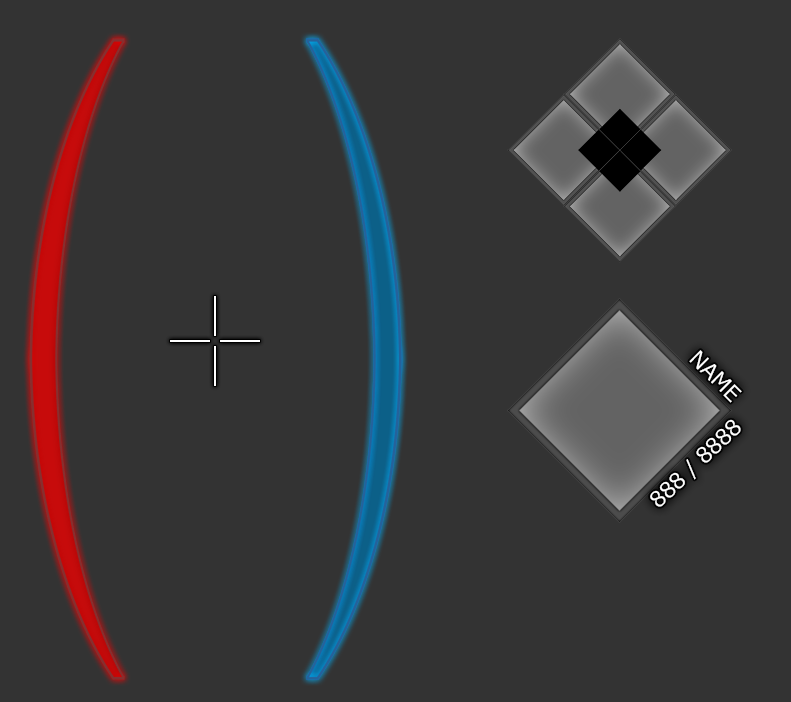
<style>
.page{position:relative;width:791px;height:702px;background:#333333}
.page>*{position:absolute;margin:0}
.t1{font:21.3px "Meiryo";color:#ffffff}
</style>
<div class="page">
<p class="t1" style="left:689px;top:350px;width:53px;height:53px;rotate:45deg">NAME</p>
<p class="t1" style="left:650px;top:419px;width:91px;height:88px;rotate:-44deg">888 / 8888</p>
</div>
